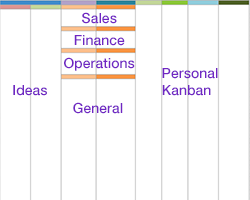
<style>
.page{position:relative;width:250px;height:200px;background:#ffffff}
.page>*{position:absolute;margin:0}
.t1{font:14px "HelveticaNeue-Medium";color:#7026c3}
</style>
<div class="page">
<p class="t1" style="left:82px;top:12px;width:35px;height:12px">Sales</p>
<p class="t1" style="left:74px;top:35px;width:51px;height:11px">Finance</p>
<p class="t1" style="left:64px;top:57px;width:71px;height:14px">Operations</p>
<p class="t1" style="left:162px;top:68px;width:56px;height:28px">Personal<br>Kanban</p>
<p class="t1" style="left:13px;top:85px;width:34px;height:11px">Ideas</p>
<p class="t1" style="left:73px;top:102px;width:50px;height:12px">General</p>
</div>
